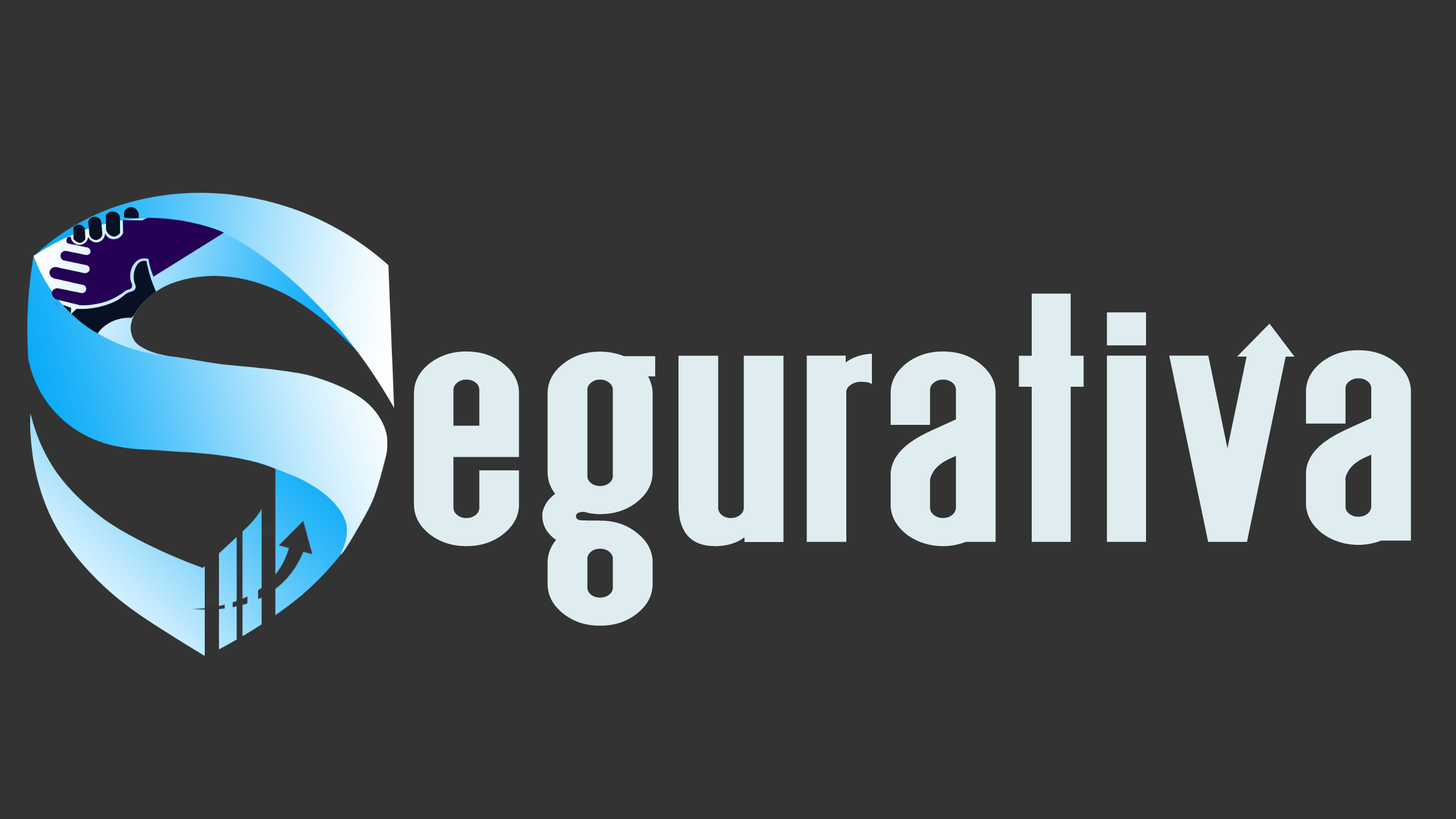
<style>
.page{position:relative;width:1456px;height:819px;background:#333333}
.page>*{position:absolute;margin:0}
.t1{font:379px "Deutschlander";letter-spacing:0.025em;color:#dfedf0;scale:1.25 1}
</style>
<div class="page">
<p class="t1" style="left:413px;top:293px;width:873px;height:333px">egurativ</p>
<p class="t1" style="left:1306px;top:350px;width:105px;height:195px">a</p>
</div>
